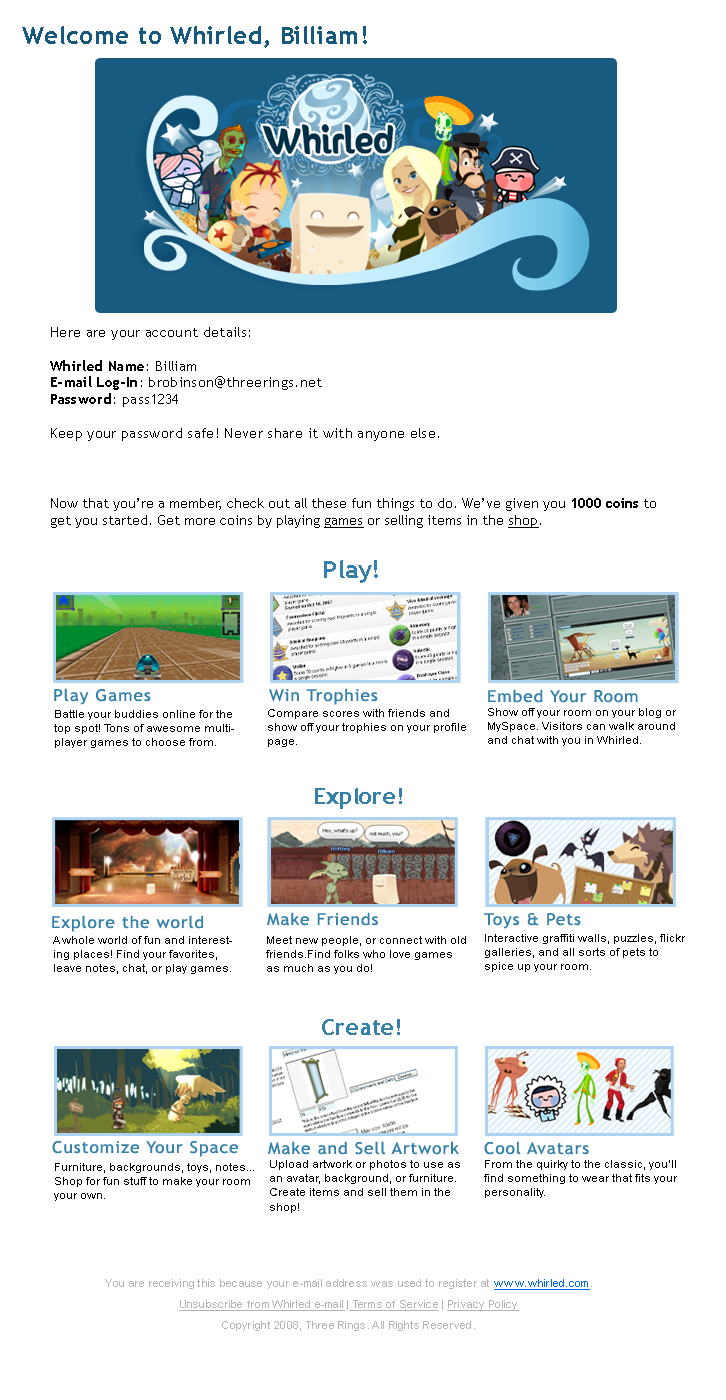
<style>
.page{position:relative;width:726px;height:1400px;background:#ffffff}
.page>*{position:absolute;margin:0}
.t1{font:24px "TrebuchetMS-Bold";letter-spacing:0.025em;color:#16587e}
.t2{font:14px "TrebuchetMS";letter-spacing:0.025em;color:#000000}
.t3{font:14px "TrebuchetMS-Bold";letter-spacing:0.025em;color:#000000}
.t4{font:13.7px "TrebuchetMS";color:#000000}
.t5{font:23.5px "TrebuchetMS-Bold";color:#000000}
.t6{font:13.7px "TrebuchetMS-Bold";color:#000000}
.t7{font:13.7px "TrebuchetMS";color:#000000;text-decoration:underline}
.t8{font:24.2px "TrebuchetMS-Bold";color:#3581aa;scale:1.07 1}
.t9{font:16.4px "TrebuchetMS";letter-spacing:0.05em;color:#3581aa;scale:1.07 1}
.t10{font:10.9px "ArialMT";color:#000000;scale:1.07 1}
.t11{font:21.8px "TrebuchetMS-Bold";color:#3581aa;scale:1.07 1}
.t12{font:11px/21px "ArialMT";letter-spacing:0.025em;color:#b2b3b4}
.t13{font:11px/21px "ArialMT";letter-spacing:0.025em;color:#0069eb;text-decoration:underline}
.t14{font:11px/21px "ArialMT";letter-spacing:0.025em;color:#b2b3b4;text-decoration:underline}
</style>
<div class="page">
<p class="t1" style="left:22px;top:26px;width:345px;height:22px">Welcome to Whirled, Billiam!</p>
<p class="t2" style="left:50px;top:327px;width:389px;height:114px">Here are your account details:<br><br><span class="t3">Whirled Name</span>: Billiam<br><span class="t3">E-mail Log-In</span>: brobinson@threerings.net<br><span class="t3">Password</span>: pass1234<br><br>Keep your password safe! Never share it with anyone else.</p>
<p class="t4" style="left:51px;top:498px;width:605px;height:30px"><span class="t5"><br></span>Now that you’re a member, check out all these fun things to do. We’ve given you <span class="t6">1000 coins</span> to get you started. Get more coins by playing <span class="t7">games</span> or selling items in the <span class="t7">shop</span>.</p>
<p class="t8" style="left:324px;top:560px;width:54px;height:23px">Play!</p>
<p class="t9" style="left:54px;top:688px;width:97px;height:17px">Play Games</p>
<p class="t9" style="left:269px;top:688px;width:109px;height:17px">Win Trophies</p>
<p class="t9" style="left:488px;top:689px;width:150px;height:14px">Embed Your Room</p>
<p class="t10" style="left:54px;top:710px;width:180px;height:38px">Battle your buddies online for the top spot! Tons of awesome multiplayer games to choose from.</p>
<p class="t10" style="left:268px;top:709px;width:198px;height:38px">Compare scores with friends and show off your trophies on your profile page.</p>
<p class="t10" style="left:488px;top:708px;width:188px;height:38px">Show off your room on your blog or MySpace. Visitors can walk around and chat with you in Whirled.</p>
<p class="t11" style="left:315px;top:788px;width:87px;height:21px">Explore!</p>
<p class="t9" style="left:52px;top:915px;width:151px;height:17px">Explore the world</p>
<p class="t9" style="left:267px;top:912px;width:111px;height:14px">Make Friends</p>
<p class="t9" style="left:484px;top:913px;width:97px;height:16px">Toys &amp; Pets</p>
<p class="t10" style="left:53px;top:936px;width:179px;height:38px">A whole world of fun and interesting places! Find your favorites, leave notes, chat, or play games.</p>
<p class="t10" style="left:266px;top:936px;width:200px;height:38px">Meet new people, or connect with old friends.Find folks who love games as much as you do!</p>
<p class="t10" style="left:485px;top:934px;width:200px;height:38px">Interactive graffiti walls, puzzles, flickr galleries, and all sorts of pets to spice up your room.</p>
<p class="t11" style="left:322px;top:1019px;width:78px;height:16px">Create!</p>
<p class="t9" style="left:52px;top:1141px;width:186px;height:16px">Customize Your Space</p>
<p class="t9" style="left:268px;top:1141px;width:191px;height:14px">Make and Sell Artwork</p>
<p class="t9" style="left:484px;top:1141px;width:105px;height:14px">Cool Avatars</p>
<p class="t10" style="left:54px;top:1163px;width:200px;height:38px">Furniture, backgrounds, toys, notes... Shop for fun stuff to make your room your own.</p>
<p class="t10" style="left:270px;top:1160px;width:190px;height:53px">Upload artwork or photos to use as an avatar, background, or furniture. Create items and sell them in the shop!</p>
<p class="t10" style="left:484px;top:1160px;width:193px;height:38px">From the quirky to the classic, you’ll find something to wear that fits your personality.</p>
<p class="t12" style="left:105px;top:1279px;width:487px;height:52px;text-align:center">You are receiving this because your e-mail address was used to register at <span class="t13">www.whirled.com</span>.<br><span class="t14">Unsubscribe from Whirled e-mail</span> |<span class="t14"> Terms of Service</span> | <span class="t14">Privacy Policy<br></span>Copyright 2008, Three Rings. All Rights Reserved.</p>
</div>
